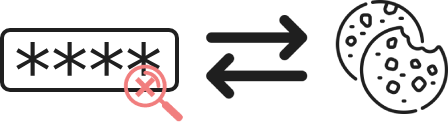
<style>
.page{position:relative;width:448px;height:122px;background:#ffffff}
.page>*{position:absolute;margin:0}
.t1{font:74px "HACKED";color:#1f1f1f}
</style>
<div class="page">
<p class="t1" style="left:16px;top:42px;width:144px;height:34px">****</p>
</div>
